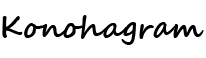
<style>
.page{position:relative;width:206px;height:58px;background:#ffffff}
.page>*{position:absolute;margin:0}
.t1{font:30px "SegoeScript-Bold";color:#000000}
</style>
<div class="page">
<p class="t1" style="left:2px;top:15px;width:202px;height:30px">Konohagram</p>
</div>
